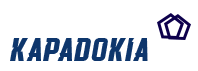
<style>
.page{position:relative;width:198px;height:71px;background:#ffffff}
.page>*{position:absolute;margin:0}
.t1{font:30px "GLITCHESPORTSDEMO-Italic";color:#0e366c}
</style>
<div class="page">
<p class="t1" style="left:10px;top:38px;width:138px;height:23px">KAPADOKIA</p>
</div>
